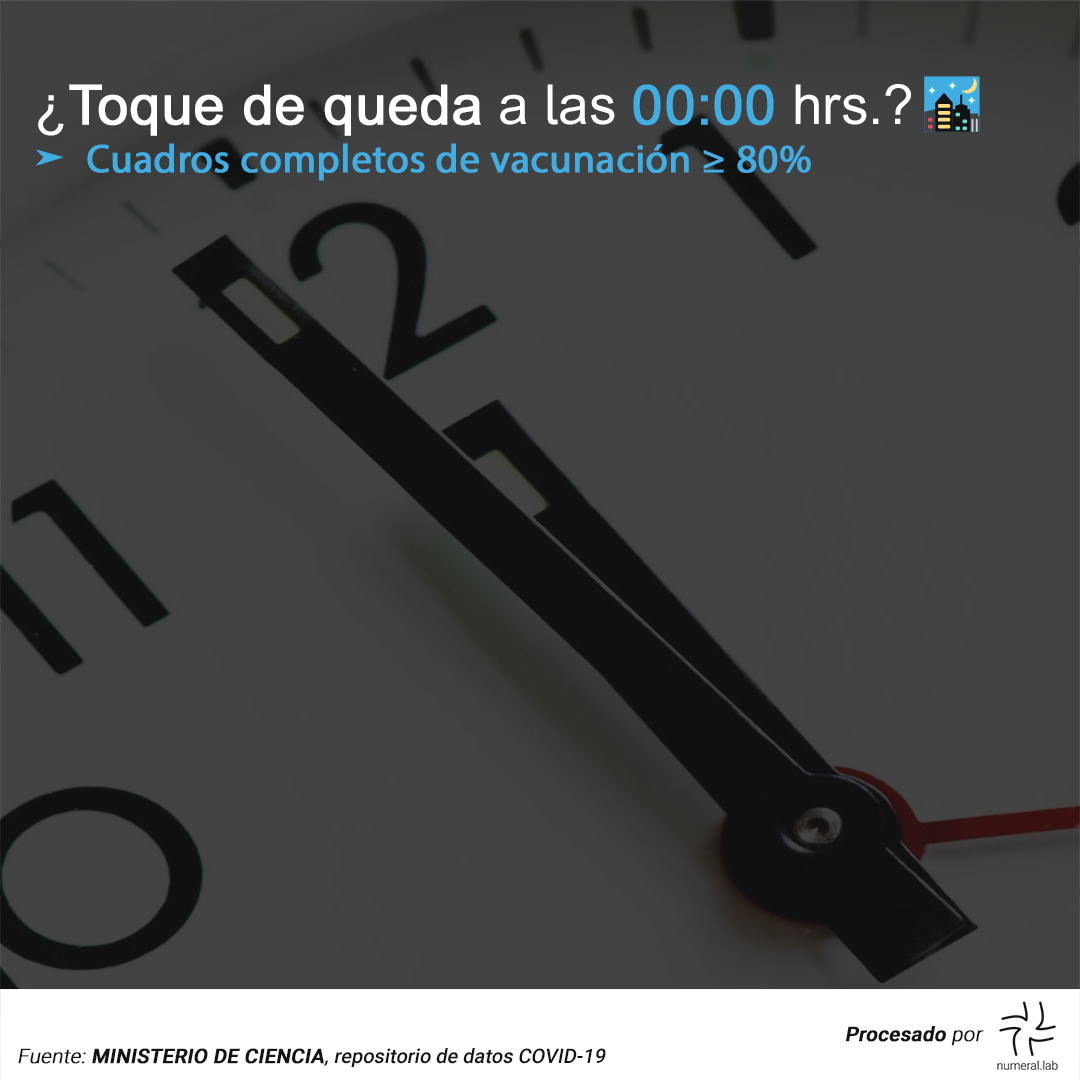
<style>
.page{position:relative;width:1080px;height:1080px;background:#424243}
.page>*{position:absolute;margin:0}
.t1{font:40px "MyriadPro-Regular";color:#42ade2;font-weight:bold}
.t2{font:55px "ArialMT";color:#ffffff}
.t3{font:55px "ArialMT";color:#ffffff;font-weight:bold}
.t4{font:55px "ArialMT";color:#42ade2;font-weight:bold}
.t5{font:55px "EmojiOneColor";color:#ffffff}
.t6{font:40px "Arrows";color:#42ade2;font-weight:bold}
.t7{font:20px "Roboto-Medium";color:#141414;font-weight:bold;font-style:italic}
.t8{font:20px "Roboto-Light";color:#141414;font-weight:bold;font-style:italic}
.t9{font:20px "Roboto-Medium";color:#141414;font-style:italic}
</style>
<div class="page">
<p class="t1" style="left:36px;top:76px;width:944px;height:105px;text-align:justify"><span class="t2">¿</span><span class="t3">Toque de queda</span><span class="t2"> a las </span><span class="t4">00:00</span><span class="t2"> hrs.? </span><span class="t5">🌃<br></span><span class="t6">a </span>Cuadros completos de vacunación ≥ 80%</p>
<p class="t7" style="left:846px;top:1026px;width:138px;height:20px">Procesado<span class="t8"> por</span></p>
<p class="t9" style="left:18px;top:1048px;width:588px;height:19px"><span class="t8">Fuente: </span><span class="t7">MINISTERIO DE CIENCIA</span>, repositorio de datos COVID-19</p>
</div>
